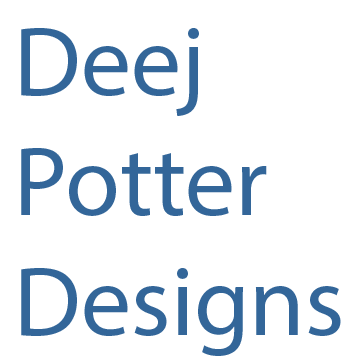
<style>
.page{position:relative;width:360px;height:360px;background:#ffffff}
.page>*{position:absolute;margin:0}
.t1{font:100px "MyriadPro-Regular";color:#336699}
</style>
<div class="page">
<p class="t1" style="left:21px;top:28px;width:320px;height:328px">Deej<br>Potter<br>Designs</p>
</div>
